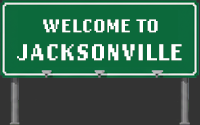
<style>
.page{position:relative;width:200px;height:125px;background:#333333}
.page>*{position:absolute;margin:0}
.t1{font:19px "LoRes12OT-Bold";letter-spacing:0.01em;color:#ffffff;text-transform:uppercase}
.t2{font:24px "LoRes12OT-Bold";letter-spacing:0.01em;color:#ffffff;text-transform:uppercase}
</style>
<div class="page">
<p class="t1" style="left:43px;top:19px;width:115px;height:14px">WELCOME TO</p>
<p class="t2" style="left:17px;top:44px;width:165px;height:17px">JACKSONVILLE</p>
</div>
